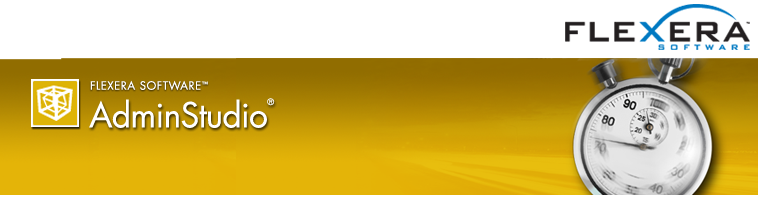
<style>
.page{position:relative;width:758px;height:200px;background:#ffffff}
.page>*{position:absolute;margin:0}
.t1{font:11.2px "FuturaCom-Book";letter-spacing:0.05em;color:#ffffff}
.t2{font:6.4px "FuturaCom-Book";letter-spacing:0.05em;color:#ffffff}
.t3{font:33.6px "FuturaCom-Book";letter-spacing:-0.022em;color:#ffffff}
.t4{font:8.6px "FuturaCom-Book";letter-spacing:-0.022em;color:#ffffff}
</style>
<div class="page">
<p class="t1" style="left:90px;top:80px;width:118px;height:11px">FLEXERA SOFTWARE<span class="t2">™</span></p>
<p class="t3" style="left:89px;top:98px;width:186px;height:30px">AdminStudio<span class="t4">®</span></p>
</div>
